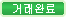
<style>
.page{position:relative;width:66px;height:17px;background:#dbf4cb}
.page>*{position:absolute;margin:0}
.t1{font:12.1px "Gulim";color:#ffffff;scale:0.91 1}
</style>
<div class="page">
<p class="t1" style="left:13px;top:4px;width:42px;height:10px">거래완료</p>
</div>
